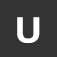
<style>
.page{position:relative;width:57px;height:57px;background:#333333}
.page>*{position:absolute;margin:0}
.t1{font:35.6px "OpenSans-Bold";color:#ffffff;scale:1.06 1}
</style>
<div class="page">
<p class="t1" style="left:17px;top:17px;width:23px;height:26px">U</p>
</div>
